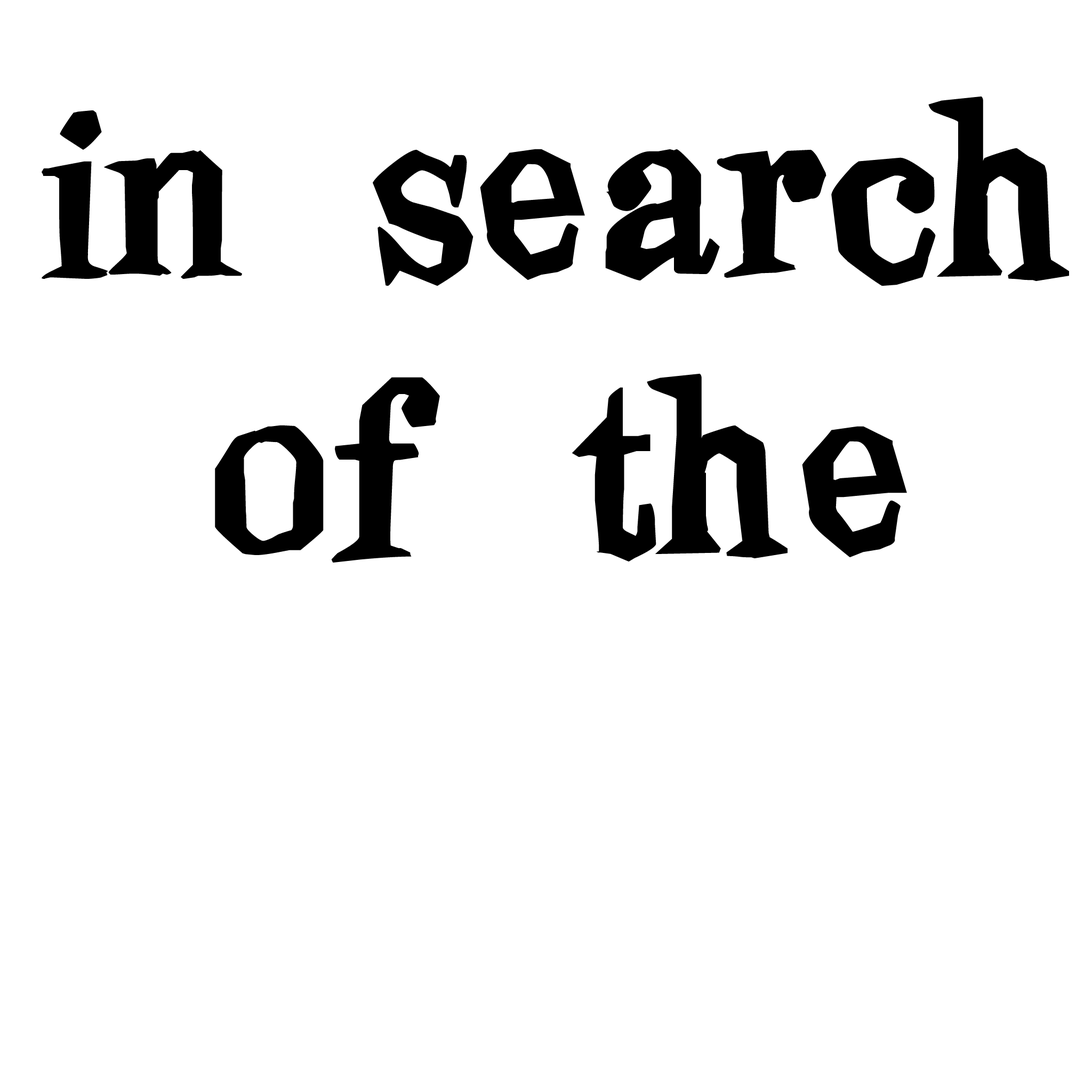
<style>
.page{position:relative;width:1092px;height:1092px;background:#ffffff}
.page>*{position:absolute;margin:0}
.t1{font:274.7px/277.1px "Blindfold";color:#000000}
</style>
<div class="page">
<p class="t1" style="left:42px;top:96px;width:1027px;height:467px;text-align:center">in search<br>of the</p>
</div>
